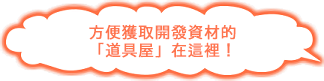
<style>
.page{position:relative;width:324px;height:81px;background:#ffffff}
.page>*{position:absolute;margin:0}
.t1{font:16px/18px "04KanjyukuGothic";letter-spacing:0.005em;color:#fe754e;font-weight:bold}
</style>
<div class="page">
<p class="t1" style="left:89px;top:24px;width:147px;height:34px">方便獲取開發資材的<br>「道具屋」在這裡！</p>
</div>
